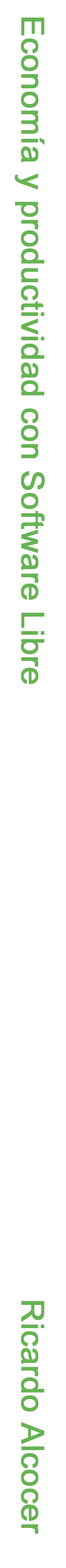
<style>
.page{position:relative;width:66px;height:1568px;background:#ffffff}
.page>*{position:absolute;margin:0}
.t1{font:31.5px "ArialMT";color:#68b255;font-weight:bold}
</style>
<div class="page">
<p class="t1" style="left:15px;top:17px;width:30px;height:1517px;rotate:90deg">Economía y productividad con Software Libre                                                                Ricardo Alcocer</p>
</div>
